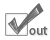
<style>
.page{position:relative;width:50px;height:40px;background:#ffffff}
.page>*{position:absolute;margin:0}
.t1{font:12px "KozGoPro-Medium";color:#666666}
</style>
<div class="page">
<p class="t1" style="left:29px;top:26px;width:19px;height:9px">out</p>
</div>
